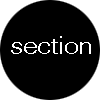
<style>
.page{position:relative;width:100px;height:100px;background:#000000}
.page>*{position:absolute;margin:0}
.t1{font:24px "Helvetica-Light";color:#ffffff;scale:1.1 1}
</style>
<div class="page">
<p class="t1" style="left:11px;top:36px;width:80px;height:18px">section</p>
</div>
